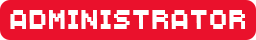
<style>
.page{position:relative;width:256px;height:40px;background:#ea112c}
.page>*{position:absolute;margin:0}
.t1{font:26.9px "MinecraftFive-Bold";letter-spacing:0.075em;color:#ffffff;scale:0.84 1}
</style>
<div class="page">
<p class="t1" style="left:10px;top:10px;width:235px;height:19px">administrator</p>
</div>
